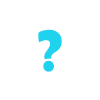
<style>
.page{position:relative;width:100px;height:100px;background:#ffffff}
.page>*{position:absolute;margin:0}
.t1{font:60px "BerlinSansFBDemi-Bold";color:#1fd3ee}
</style>
<div class="page">
<p class="t1" style="left:38px;top:29px;width:24px;height:43px">?</p>
</div>
